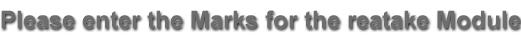
<style>
.page{position:relative;width:521px;height:38px;background:#ffffff}
.page>*{position:absolute;margin:0}
.t1{font:24px "Arial-BoldMT";color:#6d6d6d}
</style>
<div class="page">
<p class="t1" style="left:1px;top:10px;width:520px;height:19px">Please enter the Marks for the reatake Module</p>
</div>
